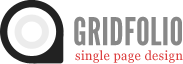
<style>
.page{position:relative;width:183px;height:64px;background:#ffffff}
.page>*{position:absolute;margin:0}
.t1{font:38.6px "LeagueGothic";letter-spacing:0.01em;color:#888888}
.t2{font:13px "Georgia";letter-spacing:0.016em;color:#dc3f3f}
</style>
<div class="page">
<p class="t1" style="left:74px;top:16px;width:108px;height:30px">GRIDFOLIO</p>
<p class="t2" style="left:75px;top:50px;width:108px;height:13px">single page design</p>
</div>
